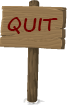
<style>
.page{position:relative;width:67px;height:105px;background:#ffffff}
.page>*{position:absolute;margin:0}
.t1{font:19px "SegoePrint-Bold";color:#6d0000}
</style>
<div class="page">
<p class="t1" style="left:7px;top:17px;width:51px;height:17px">QUIT</p>
</div>
